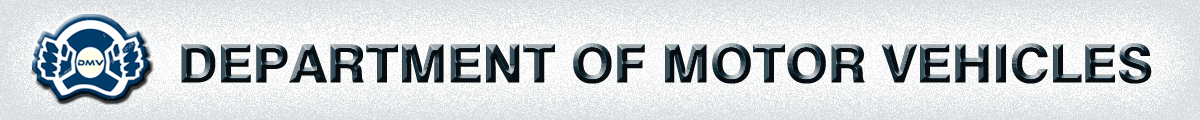
<style>
.page{position:relative;width:1200px;height:120px}
.page>*{position:absolute;margin:0}
.t1{font:52.9px "Swiss721BT-Heavy"}
</style>
<div class="page">
<p class="t1" style="left:181px;top:43px;width:971px;height:41px">DEPARTMENT OF MOTOR VEHICLES</p>
</div>
